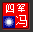
<style>
.page{position:relative;width:33px;height:32px;background:#f20000}
.page>*{position:absolute;margin:0}
.t1{font:10.4px "SimSun";color:#ffffff}
.t2{font:11.7px "SimSun";color:#ffffff}
</style>
<div class="page">
<p class="t1" style="left:6px;top:4px;width:19px;height:9px">四军</p>
<p class="t2" style="left:16px;top:15px;width:11px;height:12px">冯</p>
</div>
